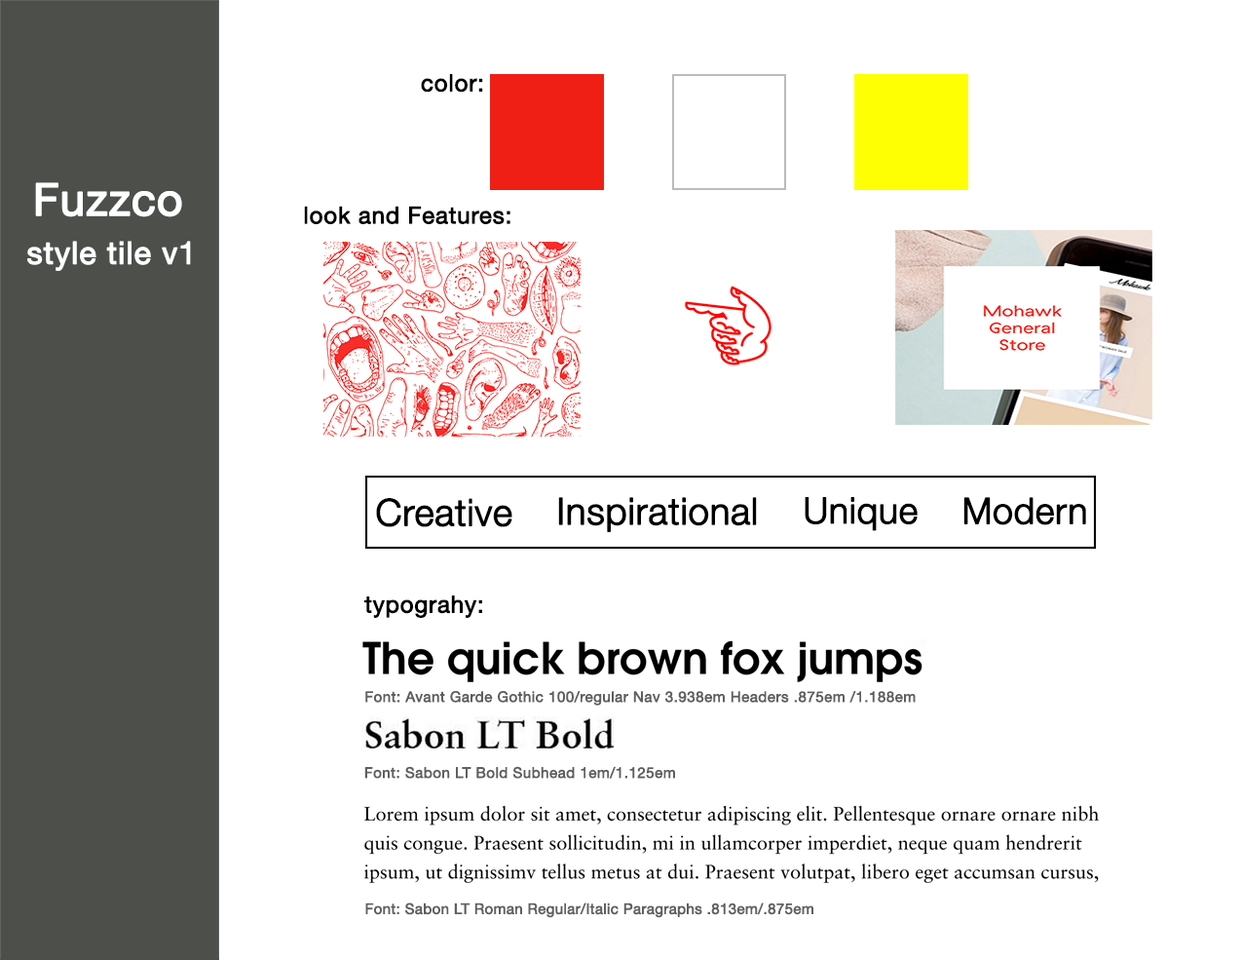
<style>
.page{position:relative;width:1242px;height:960px;background:#ffffff}
.page>*{position:absolute;margin:0}
.t1{font:23.4px "HelveticaNeue";letter-spacing:0.01em;color:#000000;font-weight:bold}
.t2{font:44.8px "HelveticaNeue";color:#ffffff;font-weight:bold}
.t3{font:46.8px "HelveticaNeue";color:#ffffff;font-weight:bold}
.t4{font:31.2px "HelveticaNeue";letter-spacing:0.01em;color:#ffffff;font-weight:bold}
.t5{font:37px "HelveticaNeue-Light";color:#000000;font-weight:bold}
.t6{font:36.1px "HelveticaNeue-Light";color:#000000;font-weight:bold}
.t7{font:14.6px "HelveticaNeue";letter-spacing:0.01em;color:#5f605e;font-weight:bold}
.t8{font:14.6px "HelveticaNeue";color:#5f605e;font-weight:bold}
</style>
<div class="page">
<p class="t1" style="left:421px;top:74px;width:62px;height:19px">color:</p>
<p class="t2" style="left:35px;top:182px;width:147px;height:35px"><span class="t3"><br></span>Fuzzco</p>
<p class="t1" style="left:304px;top:206px;width:207px;height:18px">look and Features:</p>
<p class="t4" style="left:27px;top:241px;width:164px;height:30px">style tile v1</p>
<p class="t5" style="left:376px;top:498px;width:137px;height:29px">Creative</p>
<p class="t5" style="left:558px;top:497px;width:199px;height:35px">Inspirational</p>
<p class="t6" style="left:805px;top:497px;width:113px;height:34px">Unique</p>
<p class="t6" style="left:964px;top:497px;width:122px;height:28px">Modern</p>
<p class="t1" style="left:364px;top:595px;width:118px;height:23px">typograhy:</p>
<p class="t7" style="left:365px;top:691px;width:551px;height:14px">Font: Avant Garde Gothic 100/regular Nav 3.938em Headers .875em /1.188em</p>
<p class="t7" style="left:364px;top:766px;width:311px;height:13px">Font: Sabon LT Bold Subhead 1em/1.125em</p>
<p class="t8" style="left:365px;top:902px;width:449px;height:16px">Font: Sabon LT Roman Regular/Italic Paragraphs .813em/.875em</p>
</div>
